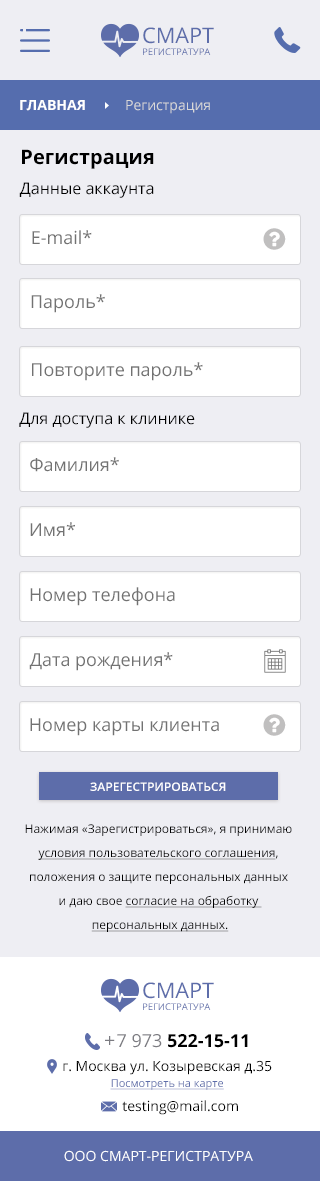
<style>
.page{position:relative;width:320px;height:1181px;background:#ffffff}
.page>*{position:absolute;margin:0}
.t1{font:9.3px/11.5px "OpenSans";color:#5d6daa}
.t2{font:21.5px/11.5px "OpenSans";color:#5d6daa}
.t3{font:14px "OpenSans";color:#d8d8d8}
.t4{font:14px "OpenSans-Bold";color:#ffffff}
.t5{font:20px "OpenSans-Bold";color:#000000}
.t6{font:16px "OpenSans";color:#000000}
.t7{font:18px "OpenSans";color:#727272}
.t8{font:12px "OpenSans-Semibold";color:#ffffff;text-transform:uppercase}
.t9{font:12px/24px "OpenSans";color:#000000}
.t10{font:12px/24px "OpenSans";color:#000000;text-decoration:underline}
.t11{font:18px "HelveticaNeue";color:#7b7b81}
.t12{font:18px "OpenSans-Bold";color:#000000}
.t13{font:18px "OpenSans";color:#000000}
.t14{font:18px "OpenSans";color:#7b7b81}
.t15{font:14px/14px "OpenSans";color:#000000}
.t16{font:11px/16px "OpenSans";color:#5d6daa;text-decoration:underline}
.t17{font:14px "OpenSans";color:#000000}
.t18{font:14px "OpenSans";color:#ffffff}
</style>
<div class="page">
<p class="t1" style="left:143px;top:27px;width:71px;height:28px"><span class="t2">CМАРТ<br></span>РЕГИСТРАТУРА</p>
<p class="t3" style="left:20px;top:100px;width:190px;height:14px"><span class="t4">ГЛАВНАЯ          </span>Регистрация</p>
<p class="t5" style="left:22px;top:149px;width:132px;height:20px">Регистрация</p>
<p class="t6" style="left:19px;top:182px;width:135px;height:16px">Данные аккаунта</p>
<p class="t7" style="left:32px;top:230px;width:60px;height:15px">E-mail*</p>
<p class="t7" style="left:31px;top:294px;width:74px;height:19px">Пароль*</p>
<p class="t7" style="left:32px;top:362px;width:171px;height:19px">Повторите пароль*</p>
<p class="t6" style="left:19px;top:412px;width:176px;height:16px">Для доступа к клинике</p>
<p class="t7" style="left:30px;top:457px;width:89px;height:15px">Фамилия*</p>
<p class="t7" style="left:30px;top:522px;width:45px;height:14px">Имя*</p>
<p class="t7" style="left:30px;top:587px;width:145px;height:19px">Номер телефона</p>
<p class="t7" style="left:29px;top:652px;width:144px;height:19px">Дата рождения*</p>
<p class="t7" style="left:30px;top:718px;width:189px;height:18px">Номер карты клиента</p>
<p class="t8" style="left:90px;top:782px;width:136px;height:9px">ЗАРЕГЕСТРИРОВАТЬСЯ</p>
<p class="t9" style="left:25px;top:824px;width:267px;height:108px;text-align:center">Нажимая «Зарегистрироваться», я принимаю <br><span class="t10">условия пользовательского соглашения</span>, <br>положения о защите персональных данных <br>и даю свое <span class="t10">согласие на обработку <br>персональных данных.</span></p>
<p class="t1" style="left:143px;top:982px;width:71px;height:28px"><span class="t2">CМАРТ<br></span>РЕГИСТРАТУРА</p>
<p class="t11" style="left:105px;top:1036px;width:10px;height:9px">+</p>
<p class="t12" style="left:117px;top:1034px;width:131px;height:14px"><span class="t13">  </span><span class="t14">7 973 </span>522-15-11</p>
<p class="t15" style="left:63px;top:1060px;width:209px;height:30px;text-align:center">г. Москва ул. Козыревская д.35<br><span class="t16">Посмотреть на карте</span></p>
<p class="t17" style="left:122px;top:1100px;width:116px;height:15px">testing@mail.com</p>
<p class="t18" style="left:64px;top:1150px;width:189px;height:12px">ООО СМАРТ-РЕГИСТРАТУРА</p>
</div>
